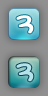
<style>
.page{position:relative;width:48px;height:96px}
.page>*{position:absolute;margin:0}
.t1{font:24px "DFMaruMoji-W9-WING-RKSJ-H";color:#ffffff;font-weight:bold}
.t2{font:24px "DFMaruMoji-W9-WING-RKSJ-H";color:#b5e3e9;font-weight:bold}
</style>
<div class="page">
<p class="t1" style="left:16px;top:15px;width:18px;height:19px">3</p>
<p class="t2" style="left:16px;top:63px;width:18px;height:19px">3</p>
</div>
